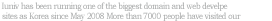
<style>
.page{position:relative;width:272px;height:21px;background:#ffffff}
.page>*{position:absolute;margin:0}
.t1{font:9px "BookmanOldStyle";letter-spacing:-0.05em;color:#a5a7a7;scale:0.85 1}
</style>
<div class="page">
<p class="t1" style="left:1px;top:2px;width:227px;height:9px">Iuniv has been running one of the biggest domain and web develpe</p>
<p class="t1" style="left:2px;top:12px;width:239px;height:9px">sites as Korea since May 2008 More than 7000 people have visited our</p>
</div>
